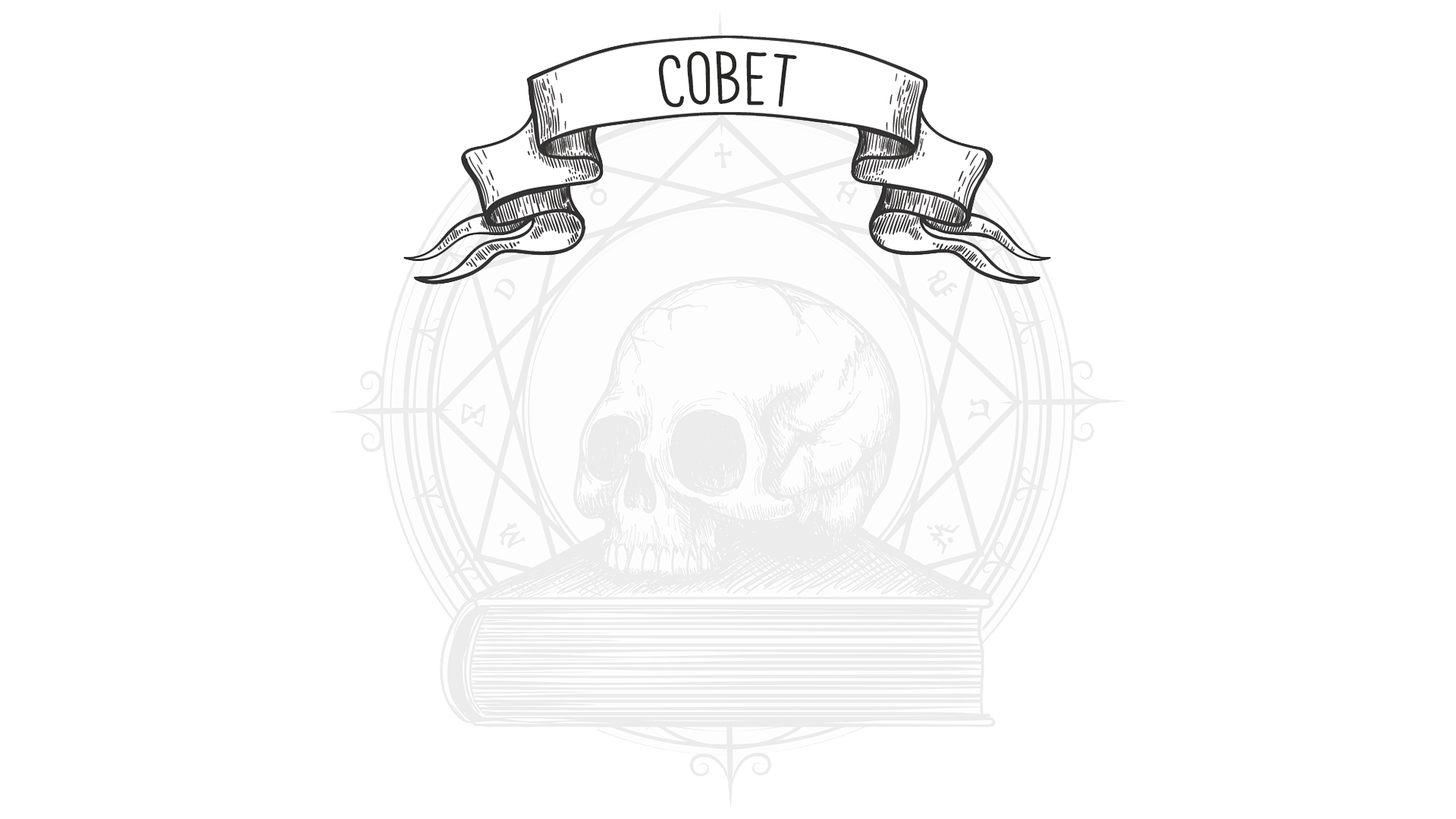
<style>
.page{position:relative;width:1456px;height:819px;background:#ffffff}
.page>*{position:absolute;margin:0}
.t1{font:45.5px "PapayaSunrise";color:#272725}
</style>
<div class="page">
<p class="t1" style="left:658px;top:51px;width:139px;height:57px">совет</p>
</div>
